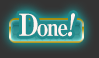
<style>
.page{position:relative;width:99px;height:58px}
.page>*{position:absolute;margin:0}
.t1{font:24px "RyuminPro-ExBold";letter-spacing:-0.08em;color:#fff5f0;scale:0.9 1}
.t2{font:30px "RyuminPro-ExBold";letter-spacing:-0.08em;color:#fff5f0;scale:0.9 1}
.t3{font:30px "RyuminPro-ExBold";letter-spacing:-0.08em;color:#fff5f0;font-style:italic;scale:0.9 1}
</style>
<div class="page">
<p class="t1" style="left:19px;top:13px;width:56px;height:24px"><span class="t2">D</span>one<span class="t3">!</span></p>
</div>
